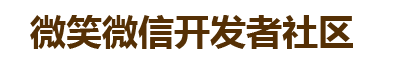
<style>
.page{position:relative;width:400px;height:66px;background:#ffffff}
.page>*{position:absolute;margin:0}
.t1{font:36px "MicrosoftYaHei-Bold";color:#553005}
</style>
<div class="page">
<p class="t1" style="left:30px;top:15px;width:323px;height:34px">微笑微信开发者社区</p>
</div>
